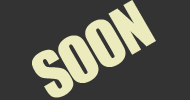
<style>
.page{position:relative;width:190px;height:100px;background:#333333}
.page>*{position:absolute;margin:0}
.t1{font:60px "Impact";letter-spacing:-0.025em;color:#ffffcc}
</style>
<div class="page">
<p class="t1" style="left:32px;top:0px;width:124px;height:98px;rotate:-30deg;opacity:0.9">SOON</p>
</div>
